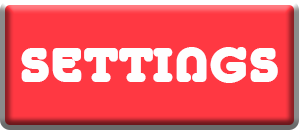
<style>
.page{position:relative;width:300px;height:130px;background:#ff3842}
.page>*{position:absolute;margin:0}
.t1{font:48px "MelodBold";letter-spacing:0.055em;color:#ffffff}
</style>
<div class="page">
<p class="t1" style="left:21px;top:47px;width:257px;height:36px">SETTINGS</p>
</div>
